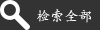
<style>
.page{position:relative;width:100px;height:30px;background:#333333}
.page>*{position:absolute;margin:0}
.t1{font:14px "STKaiti";color:#ffffff}
</style>
<div class="page">
<p class="t1" style="left:37px;top:9px;width:54px;height:14px">检索全部</p>
</div>
